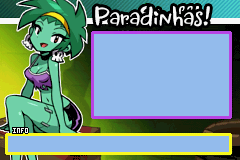
<style>
.page{position:relative;width:240px;height:160px;background:#93bbec}
.page>*{position:absolute;margin:0}
.t1{font:28.5px "Jewels";color:#f8f8f8}
</style>
<div class="page">
<p class="t1" style="left:95px;top:6px;width:115px;height:21px">Paradinhas!</p>
</div>
